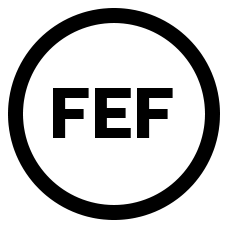
<style>
.page{position:relative;width:227px;height:226px;background:#ffffff}
.page>*{position:absolute;margin:0}
.t1{font:75px "FranklinGothic-Demi";color:#000000}
</style>
<div class="page">
<p class="t1" style="left:53px;top:88px;width:120px;height:50px">FEF</p>
</div>
